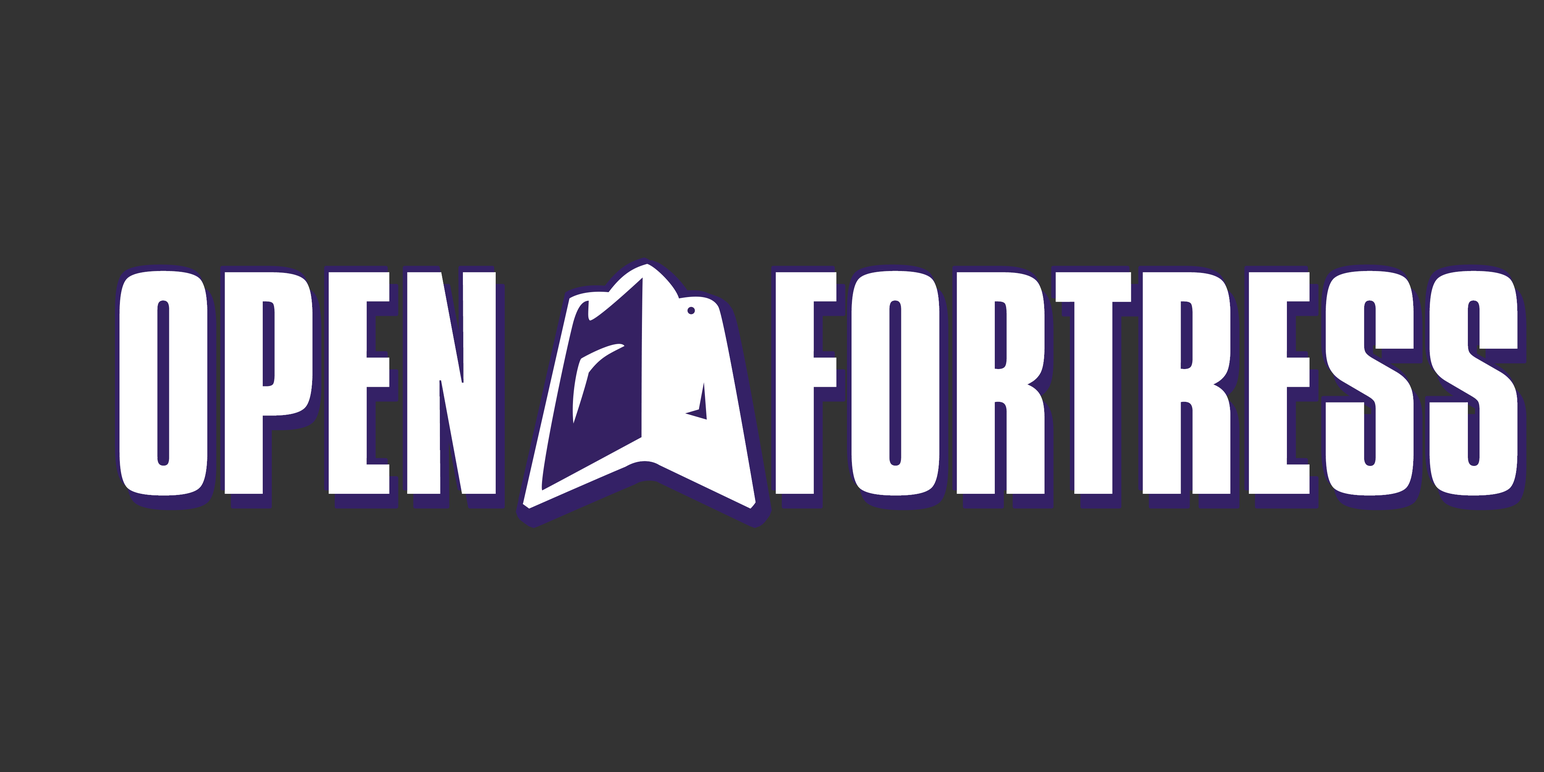
<style>
.page{position:relative;width:1544px;height:772px;background:#333333}
.page>*{position:absolute;margin:0}
.t1{font:272.8px "CompactaBT-Roman";color:#ffffff}
</style>
<div class="page">
<p class="t1" style="left:120px;top:271px;width:1398px;height:225px">OPEN     FORTRESS</p>
<p class="t1" style="left:120px;top:271px;width:1398px;height:225px">OPEN     FORTRESS</p>
</div>
